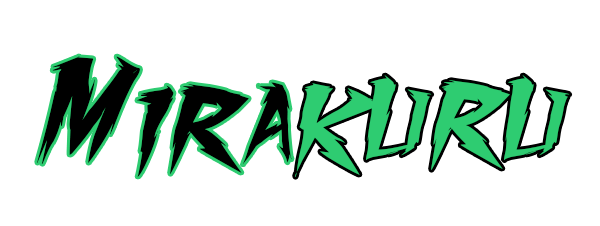
<style>
.page{position:relative;width:600px;height:226px;background:#ffffff}
.page>*{position:absolute;margin:0}
.t1{font:120px "FightingSpiritturbo";color:#000000}
.t2{font:120px "FightingSpiritturbo";color:#2ecc71}
</style>
<div class="page">
<p class="t1" style="left:37px;top:56px;width:255px;height:121px">Mira</p>
<p class="t2" style="left:295px;top:75px;width:275px;height:102px">kuru</p>
</div>
